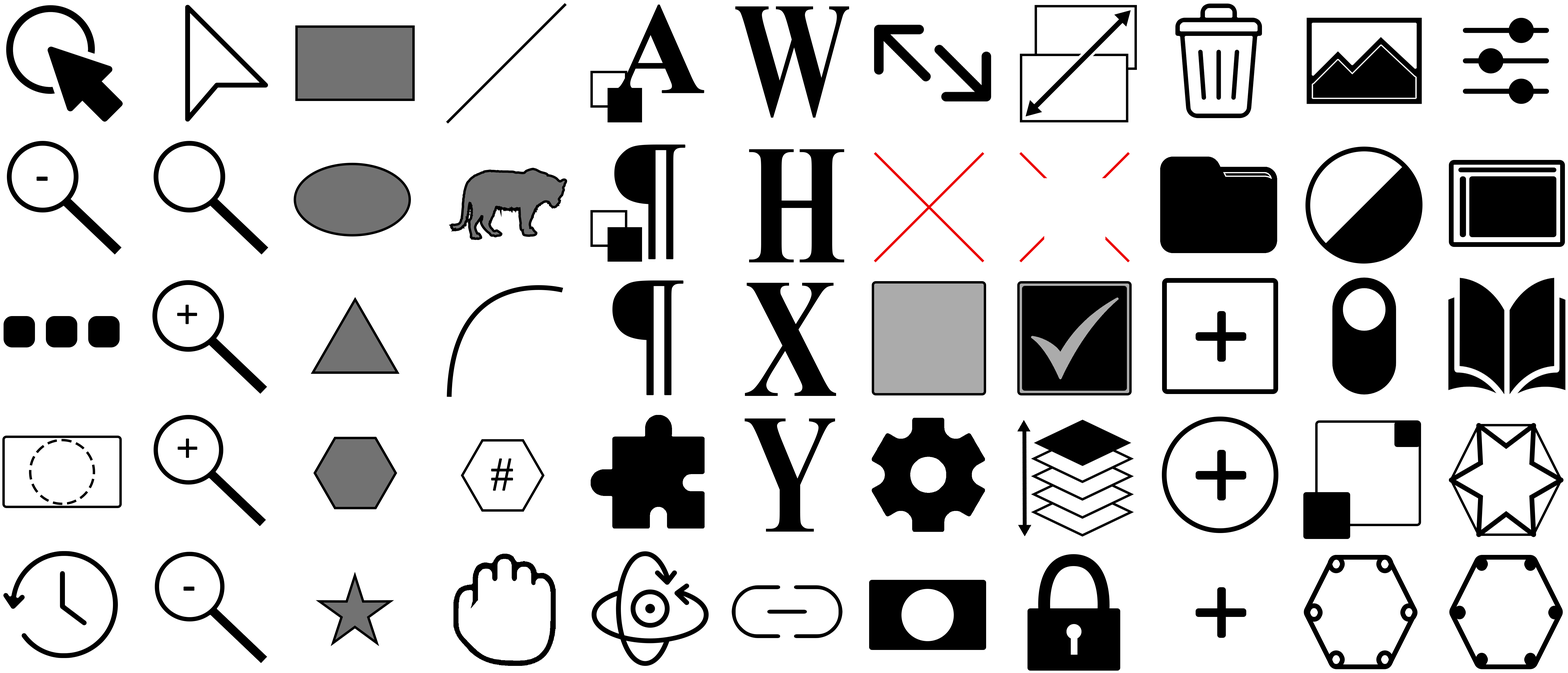
<style>
.page{position:relative;width:1568px;height:673px;background:#ffffff}
.page>*{position:absolute;margin:0}
.t1{font:129.7px "TimesNewRomanPS-BoldMT";color:#000000;font-weight:bold}
.t2{font:164.2px "TimesNewRomanPS-BoldMT";color:#000000;scale:0.71 1}
.t3{font:170.8px "TimesNewRomanPS-BoldMT";color:#000000;scale:0.75 1}
.t4{font:35.7px "TimesNewRomanPS-BoldMT";color:#000000;font-weight:bold}
.t5{font:35.2px "TimesNewRomanPS-BoldMT";color:#000000;font-weight:bold}
.t6{font:45.3px "TimesNewRomanPSMT";color:#000000;font-weight:bold}
</style>
<div class="page">
<p class="t1" style="left:612px;top:5px;width:92px;height:88px">A</p>
<p class="t2" style="left:735px;top:6px;width:114px;height:112px">W</p>
<p class="t1" style="left:614px;top:145px;width:71px;height:114px">¶</p>
<p class="t3" style="left:749px;top:149px;width:95px;height:114px">H</p>
<p class="t4" style="left:36px;top:177px;width:12px;height:4px">-</p>
<p class="t1" style="left:612px;top:281px;width:71px;height:114px">¶</p>
<p class="t3" style="left:745px;top:283px;width:91px;height:113px">X</p>
<p class="t4" style="left:177px;top:305px;width:20px;height:19px">+</p>
<p class="t3" style="left:745px;top:419px;width:90px;height:113px">Y</p>
<p class="t5" style="left:178px;top:439px;width:19px;height:19px">+</p>
<p class="t6" style="left:491px;top:459px;width:22px;height:32px">#</p>
<p class="t5" style="left:183px;top:587px;width:12px;height:4px">-</p>
</div>
